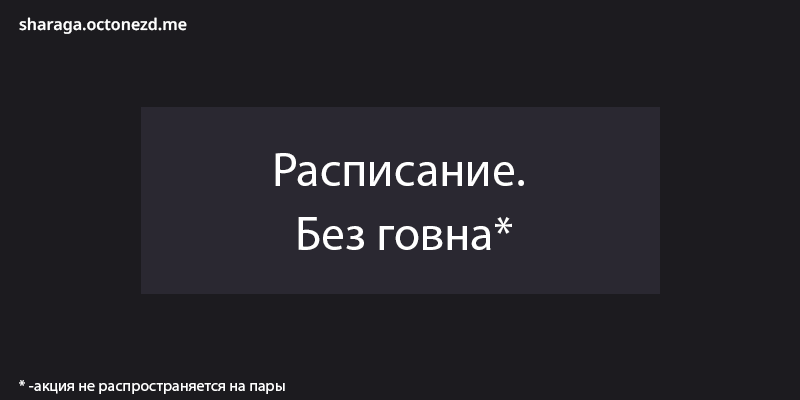
<style>
.page{position:relative;width:800px;height:400px;background:#1c1b1f}
.page>*{position:absolute;margin:0}
.t1{font:16px "NotoSans-SemiBold";color:#ffffff}
.t2{font:48.1px/64.2px "MyriadPro-Regular";color:#ffffff}
.t3{font:16px "MyriadPro-Regular";color:#ffffff}
</style>
<div class="page">
<p class="t1" style="left:19px;top:17px;width:168px;height:17px">sharaga.octonezd.me</p>
<p class="t2" style="left:275px;top:153px;width:249px;height:97px;text-align:center">Расписание. <br>Без говна*</p>
<p class="t3" style="left:19px;top:380px;width:266px;height:14px">* -акция не распространяется на пары</p>
</div>
